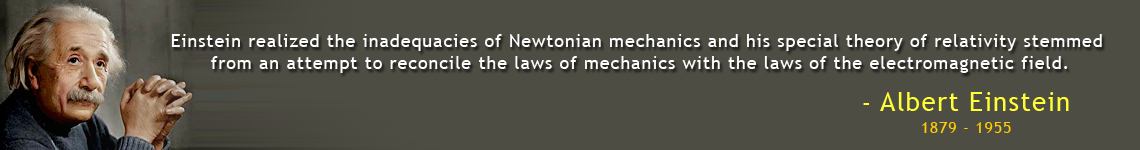
<style>
.page{position:relative;width:1140px;height:150px;background:#4d4d43}
.page>*{position:absolute;margin:0}
.t1{font:18px "TrebuchetMS";letter-spacing:0.05em;color:#fefefe}
.t2{font:26px "TrebuchetMS";letter-spacing:0.05em;color:#ffff33}
.t3{font:16px "TrebuchetMS";letter-spacing:0.05em;color:#ffcc00}
</style>
<div class="page">
<p class="t1" style="left:171px;top:34px;width:931px;height:39px;text-align:center">Einstein realized the inadequacies of Newtonian mechanics and his special theory of relativity stemmed <br>from an attempt to reconcile the laws of mechanics with the laws of the electromagnetic field.</p>
<p class="t2" style="left:863px;top:92px;width:206px;height:19px">- Albert Einstein</p>
<p class="t3" style="left:922px;top:122px;width:89px;height:11px">1879 - 1955</p>
</div>
